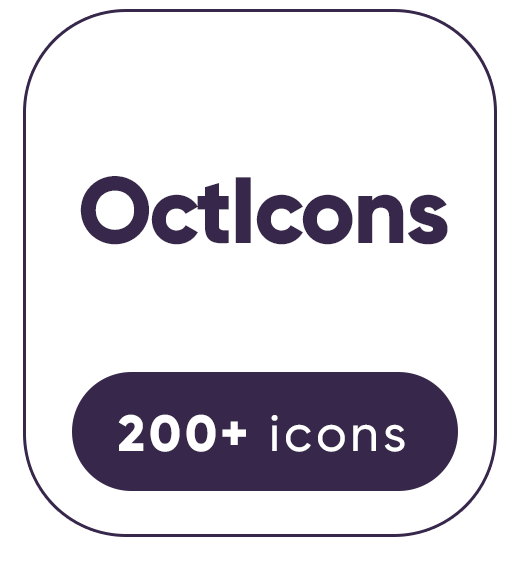
<style>
.page{position:relative;width:523px;height:562px;background:#ffffff}
.page>*{position:absolute;margin:0}
.t1{font:93.8px "Gilroy-ExtraBold";letter-spacing:-0.025em;color:#36274b}
.t2{font:50.9px "Gilroy-Medium";letter-spacing:0.075em;color:#ffffff}
.t3{font:50.9px "Gilroy-ExtraBold";letter-spacing:0.075em;color:#ffffff}
</style>
<div class="page">
<p class="t1" style="left:80px;top:176px;width:368px;height:69px">OctIcons</p>
<p class="t2" style="left:118px;top:414px;width:287px;height:38px"><span class="t3">200+ </span>icons</p>
</div>
